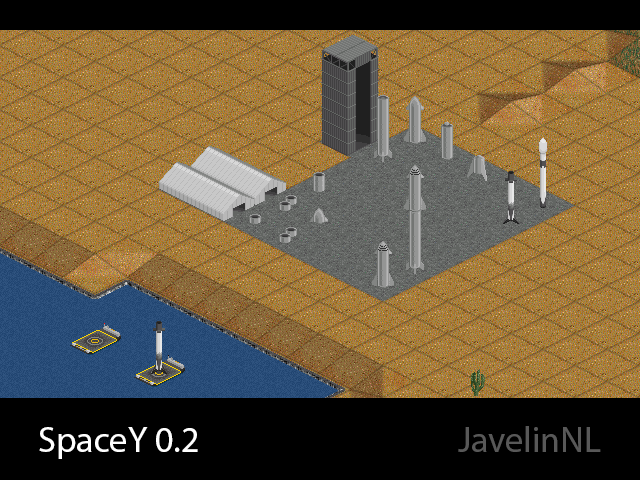
<style>
.page{position:relative;width:640px;height:480px;background:#000000}
.page>*{position:absolute;margin:0}
.t1{font:36px "MyriadPro-Regular";color:#ffffff}
.t2{font:36px "MyriadPro-Regular";color:#585858}
</style>
<div class="page">
<p class="t1" style="left:39px;top:427px;width:159px;height:32px">SpaceY 0.2</p>
<p class="t2" style="left:458px;top:426px;width:143px;height:26px">JavelinNL</p>
</div>
